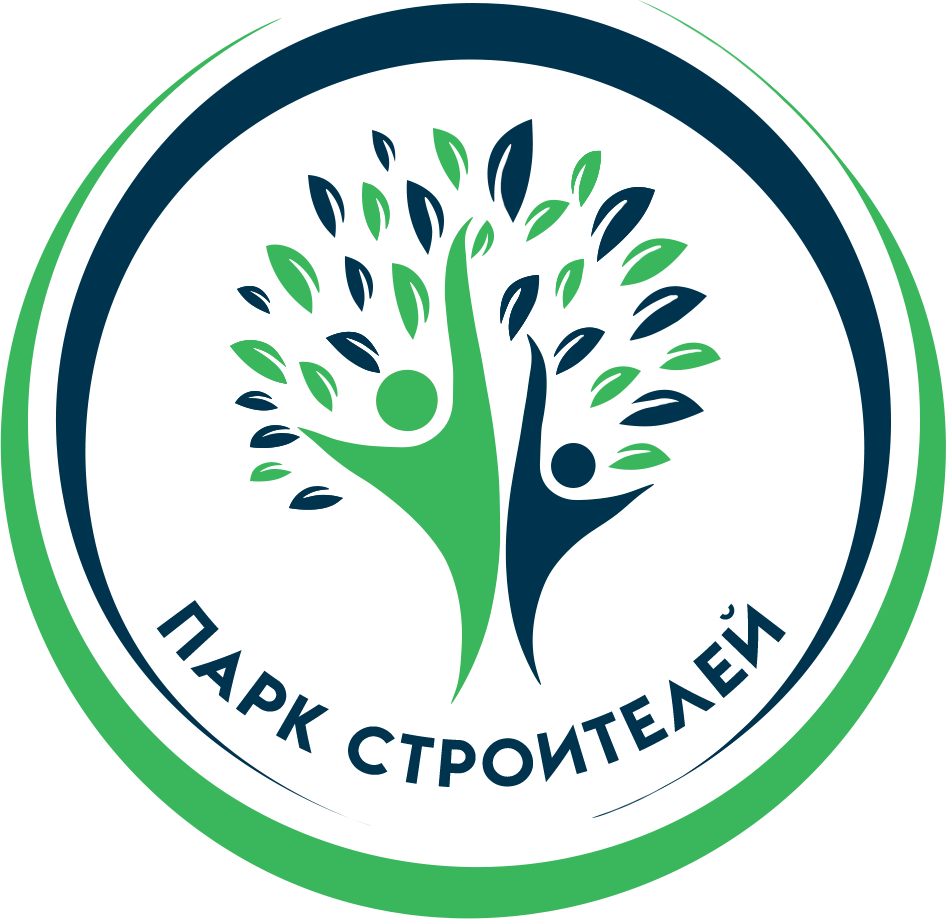
<style>
.page{position:relative;width:946px;height:919px;background:#ffffff}
.page>*{position:absolute;margin:0}
.t1{font:60px "LemonMilkRUSBYLYAJKA";letter-spacing:0.075em;color:#00334e;scale:0.83 1}
</style>
<div class="page">
<p class="t1" style="left:156px;top:600px;width:630px;height:187px">Парк строителей</p>
</div>
